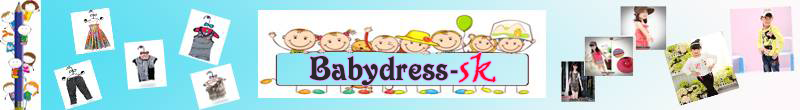
<style>
.page{position:relative;width:800px;height:110px}
.page>*{position:absolute;margin:0}
.t1{font:36px "VictorianLetPlain";color:#282828}
.t2{font:36px "VinerHandITC";color:#fb062e}
</style>
<div class="page">
<p class="t1" style="left:309px;top:52px;width:187px;height:34px">Babydress-<span class="t2">sk</span></p>
</div>
